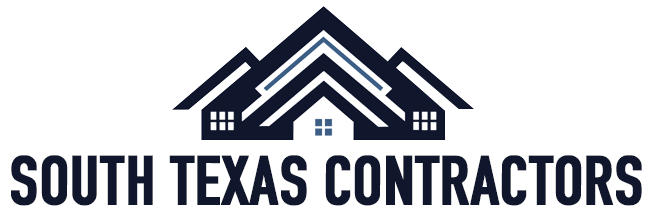
<style>
.page{position:relative;width:650px;height:210px;background:#ffffff}
.page>*{position:absolute;margin:0}
.t1{font:67.9px "DINCondensed-Bold";color:#10162c;font-weight:bold}
</style>
<div class="page">
<p class="t1" style="left:11px;top:155px;width:631px;height:51px">SOUTH TEXAS CONTRACTORS</p>
</div>
